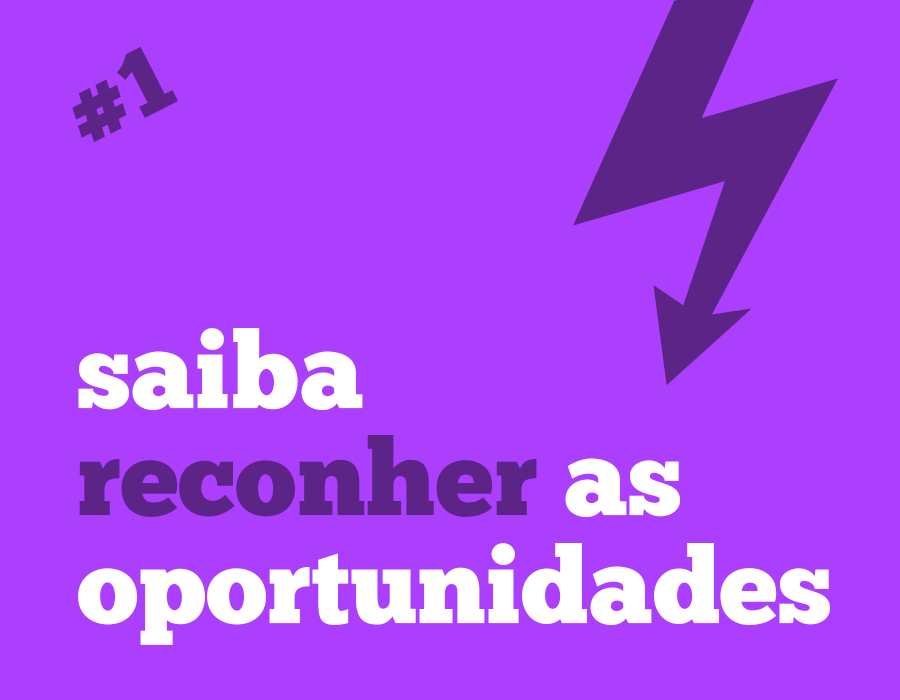
<style>
.page{position:relative;width:900px;height:700px;background:#ac3ffe}
.page>*{position:absolute;margin:0}
.t1{font:93.6px "ChunkFive-Roman";color:#5d2488}
.t2{font:106.7px/107.8px "ChunkFive-Roman";color:#ffffff}
.t3{font:106.7px/107.8px "ChunkFive-Roman";color:#5d2488}
</style>
<div class="page">
<p class="t1" style="left:72px;top:46px;width:106px;height:97px;rotate:-27deg">#1</p>
<p class="t2" style="left:78px;top:328px;width:752px;height:317px">saiba<br><span class="t3">reconher</span> as<br>oportunidades</p>
</div>
